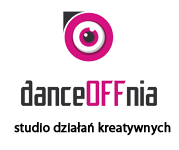
<style>
.page{position:relative;width:179px;height:150px;background:#ffffff}
.page>*{position:absolute;margin:0}
.t1{font:13px "MyriadPro-Regular";color:#000000;font-weight:bold}
</style>
<div class="page">
<p class="t1" style="left:14px;top:122px;width:157px;height:14px">studio działań kreatywnych</p>
</div>
